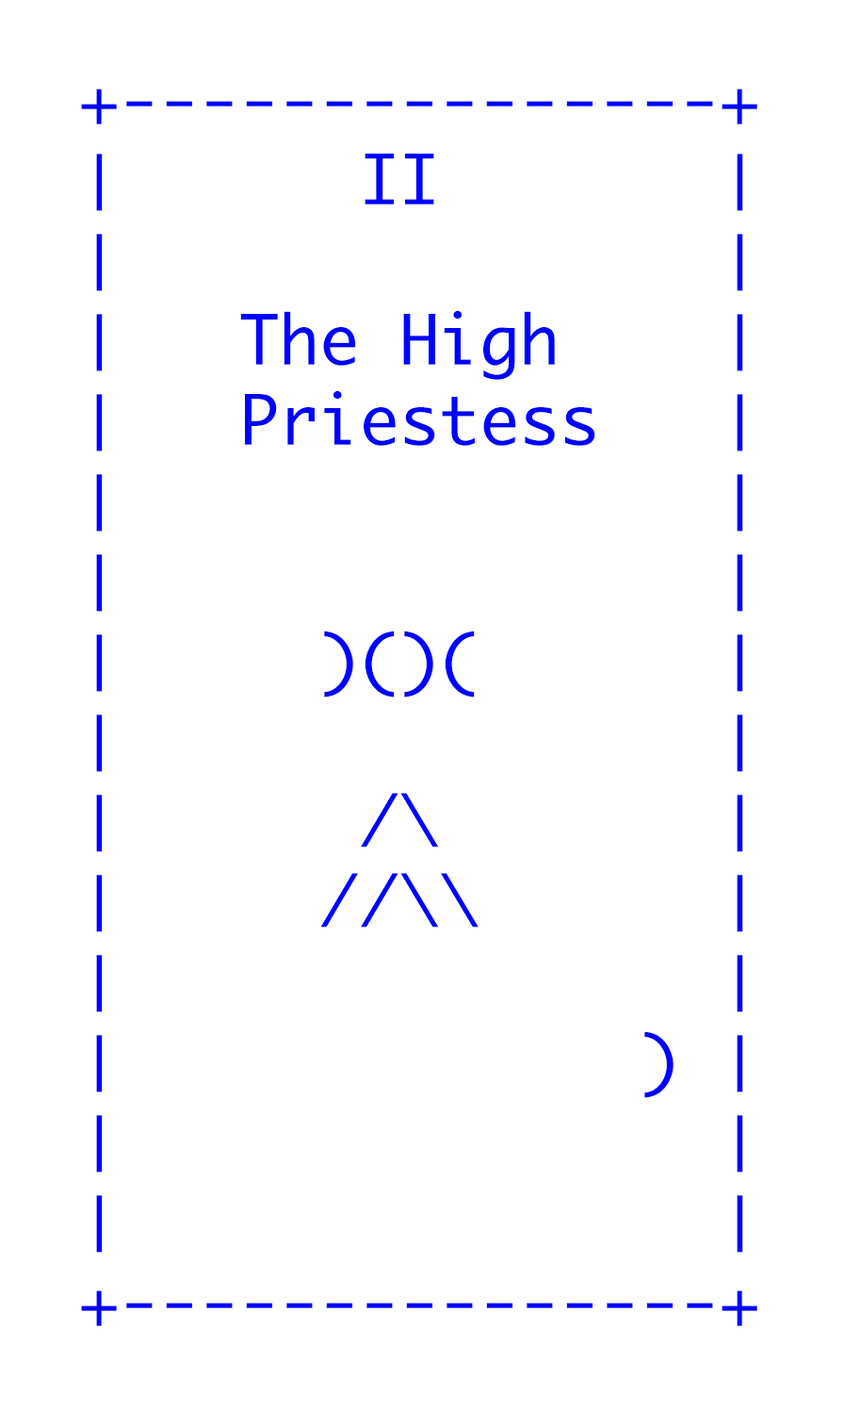
<style>
.page{position:relative;width:845px;height:1411px;background:#ffffff}
.page>*{position:absolute;margin:0}
.t1{font:66.7px "Monaco";color:#0000ff}
</style>
<div class="page">
<p class="t1" style="left:81px;top:89px;width:677px;height:1237px">+---------------+<br>│      II       │<br>│               │<br>│   The High    │<br>│   Priestess   │<br>│               │<br>│               │<br>│     )()(      │  <br>│               │ <br>│      /\       │ <br>│     //\\      │ <br>│               │  <br>│             ) │ <br>│               │<br>│               │<br>+---------------+<br><br><br><br><br>├───────────────┤</p>
</div>
